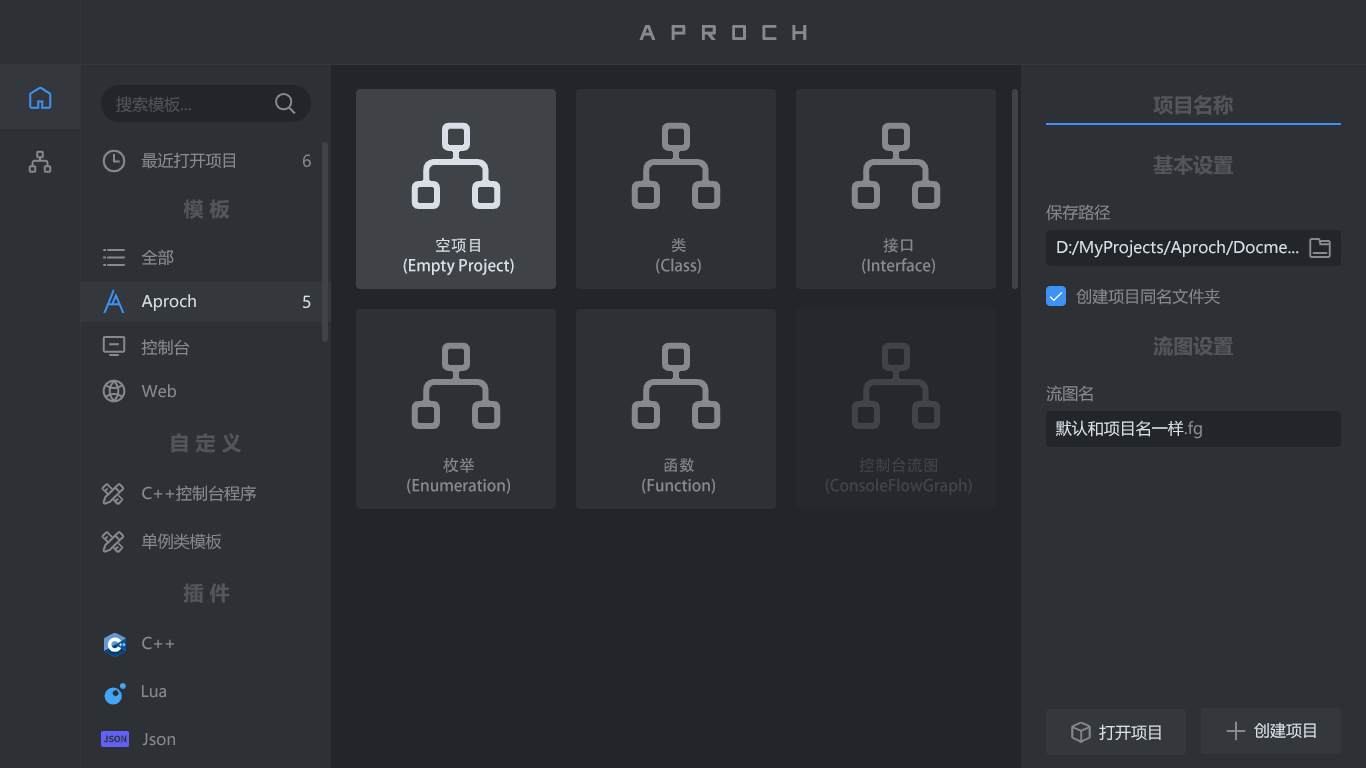
<style>
.page{position:relative;width:1366px;height:768px;background:#2d3035}
.page>*{position:absolute;margin:0}
.t1{font:24px "HDRight";letter-spacing:0.6em;color:#86898e}
.t2{font:16px "MicrosoftYaHei";color:#535659}
.t3{font:20px "MicrosoftYaHei-Bold";color:#535659}
.t4{font:16px "MicrosoftYaHei";color:#86898e}
.t5{font:16px/20px "AdobeHeitiStd-Regular";color:#dadfe7}
.t6{font:16px/20px "AdobeHeitiStd-Regular";color:#86898e}
.t7{font:16px "MicrosoftYaHei";color:#dadfe7}
.t8{font:32px "Graven";color:#3d92f6}
.t9{font:16px/20px "AdobeHeitiStd-Regular";color:#404348}
</style>
<div class="page">
<p class="t1" style="left:639px;top:25px;width:168px;height:15px">APROCH</p>
<p class="t2" style="left:116px;top:96px;width:75px;height:17px">搜索模板...</p>
<p class="t3" style="left:1153px;top:95px;width:80px;height:20px">项目名称</p>
<p class="t4" style="left:141px;top:152px;width:94px;height:17px">最近打开项目</p>
<p class="t4" style="left:303px;top:154px;width:8px;height:13px">6</p>
<p class="t3" style="left:1153px;top:155px;width:80px;height:20px">基本设置</p>
<p class="t3" style="left:183px;top:199px;width:47px;height:20px">模 板</p>
<p class="t4" style="left:1046px;top:204px;width:64px;height:17px">保存路径</p>
<p class="t5" style="left:403px;top:237px;width:111px;height:39px;text-align:center">空项目<br>(Empty Project)</p>
<p class="t6" style="left:656px;top:238px;width:45px;height:36px;text-align:center">类<br>(Class)</p>
<p class="t6" style="left:862px;top:238px;width:73px;height:36px;text-align:center">接口<br>(Interface)</p>
<p class="t7" style="left:1057px;top:240px;width:242px;height:18px">D:/MyProjects/Aproch/Docme...</p>
<p class="t4" style="left:141px;top:249px;width:33px;height:16px">全部</p>
<p class="t8" style="left:103px;top:289px;width:22px;height:24px">A</p>
<p class="t7" style="left:141px;top:294px;width:55px;height:17px">Aproch</p>
<p class="t4" style="left:1076px;top:288px;width:144px;height:17px">创建项目同名文件夹</p>
<p class="t7" style="left:303px;top:295px;width:8px;height:13px">5</p>
<p class="t4" style="left:141px;top:339px;width:49px;height:17px">控制台</p>
<p class="t3" style="left:1153px;top:336px;width:80px;height:20px">流图设置</p>
<p class="t4" style="left:141px;top:384px;width:35px;height:14px">Web</p>
<p class="t4" style="left:1046px;top:385px;width:47px;height:17px">流图名</p>
<p class="t7" style="left:1056px;top:420px;width:146px;height:19px">默认和项目名一样<span class="t4">.fg</span></p>
<p class="t3" style="left:171px;top:433px;width:71px;height:20px">自 定 义</p>
<p class="t6" style="left:407px;top:457px;width:103px;height:37px;text-align:center">枚举<br>(Enumeration)</p>
<p class="t6" style="left:642px;top:458px;width:73px;height:36px;text-align:center">函数<br>(Function)</p>
<p class="t9" style="left:825px;top:457px;width:147px;height:38px;text-align:center">控制台流图<br>(ConsoleFlowGraph)</p>
<p class="t4" style="left:142px;top:485px;width:114px;height:17px">C++控制台程序</p>
<p class="t4" style="left:142px;top:533px;width:80px;height:17px">单例类模板</p>
<p class="t3" style="left:183px;top:583px;width:47px;height:20px">插 件</p>
<p class="t4" style="left:142px;top:636px;width:32px;height:14px">C++</p>
<p class="t4" style="left:142px;top:685px;width:24px;height:13px">Lua</p>
<p class="t7" style="left:1099px;top:724px;width:62px;height:17px">打开项目</p>
<p class="t7" style="left:1254px;top:722px;width:62px;height:17px">创建项目</p>
<p class="t4" style="left:142px;top:733px;width:33px;height:13px">Json</p>
</div>
